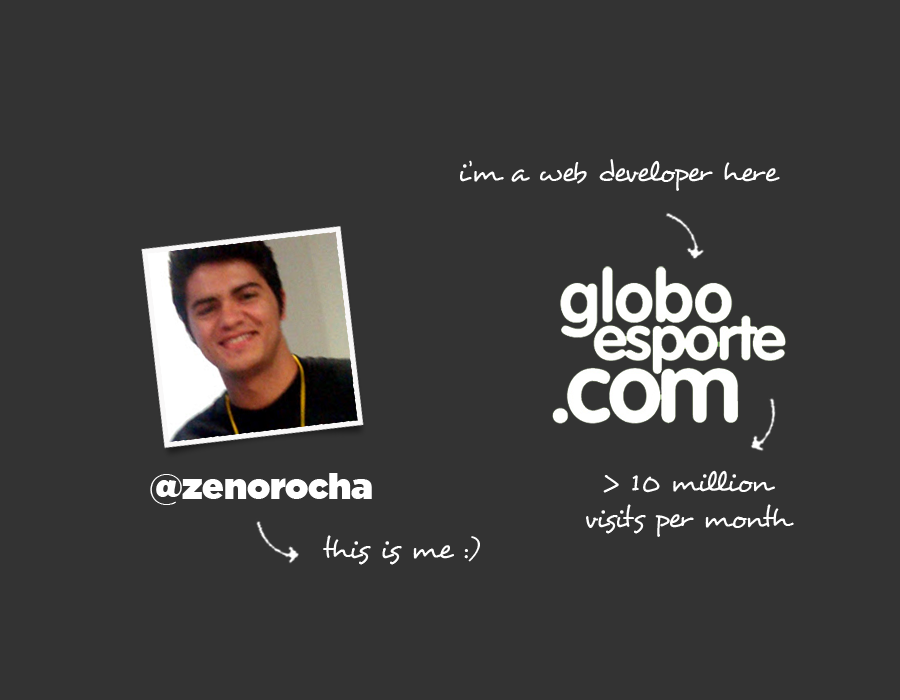
<style>
.page{position:relative;width:900px;height:700px;background:#333333}
.page>*{position:absolute;margin:0}
.t1{font:30px "Desyrel";color:#ffffff}
.t2{font:35.6px "GothamUltra";color:#ffffff}
.t3{font:30px/36px "Desyrel";color:#ffffff}
</style>
<div class="page">
<p class="t1" style="left:460px;top:159px;width:320px;height:32px">i’m a web developer here</p>
<p class="t2" style="left:150px;top:473px;width:222px;height:32px">@zenorocha</p>
<p class="t3" style="left:586px;top:470px;width:208px;height:67px;text-align:center">&gt; 10 million<br>visits per month</p>
<p class="t1" style="left:323px;top:535px;width:157px;height:30px">this is me :)</p>
</div>
